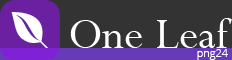
<style>
.page{position:relative;width:232px;height:60px;background:#333333}
.page>*{position:absolute;margin:0}
.t1{font:48px "Perpetua";color:#ffffff}
.t2{font:11px "OpenSans-Light";color:#ffffff}
</style>
<div class="page">
<p class="t1" style="left:70px;top:18px;width:162px;height:30px">One Leaf</p>
<p class="t2" style="left:197px;top:49px;width:31px;height:11px">png24</p>
</div>
